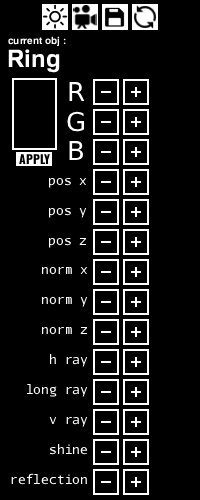
<style>
.page{position:relative;width:200px;height:500px;background:#000000}
.page>*{position:absolute;margin:0}
.t1{font:10px "FamiliarPro-Bold";color:#ffffff}
.t2{font:24px "FamiliarPro-Bold";color:#ffffff}
.t3{font:13px "AurulentSansMono-Regular";color:#ffffff}
</style>
<div class="page">
<p class="t1" style="left:8px;top:36px;width:58px;height:11px">current obj :</p>
<p class="t2" style="left:8px;top:49px;width:52px;height:24px">Ring</p>
<p class="t3" style="left:48px;top:177px;width:39px;height:11px">pos x</p>
<p class="t3" style="left:48px;top:207px;width:39px;height:11px">pos y</p>
<p class="t3" style="left:48px;top:237px;width:39px;height:11px">pos z</p>
<p class="t3" style="left:41px;top:266px;width:47px;height:9px">norm x</p>
<p class="t3" style="left:41px;top:296px;width:47px;height:11px">norm y</p>
<p class="t3" style="left:41px;top:326px;width:47px;height:9px">norm z</p>
<p class="t3" style="left:49px;top:353px;width:39px;height:14px">h ray</p>
<p class="t3" style="left:26px;top:383px;width:62px;height:14px">long ray</p>
<p class="t3" style="left:49px;top:416px;width:39px;height:11px">v ray</p>
<p class="t3" style="left:50px;top:443px;width:38px;height:12px">shine</p>
<p class="t3" style="left:11px;top:473px;width:76px;height:12px">reflection</p>
</div>
